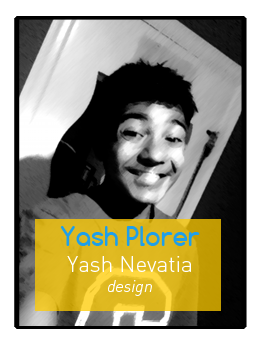
<style>
.page{position:relative;width:263px;height:345px;background:#ffffff}
.page>*{position:absolute;margin:0}
.t1{font:22.2px "DIN-Light";color:#ffffff}
.t2{font:25px "Comfortaa-Bold";color:#20a0ea}
.t3{font:16.7px "DIN-LightItalicAlt";color:#ffffff}
</style>
<div class="page">
<p class="t1" style="left:60px;top:226px;width:140px;height:70px;text-align:center"><span class="t2">Yash Plorer<br></span>Yash Nevatia<br><span class="t3">design</span></p>
</div>
